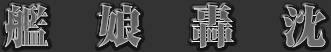
<style>
.page{position:relative;width:331px;height:52px;background:#333333}
.page>*{position:absolute;margin:0}
.t1{font:44px "RyuminPro-Ultra";letter-spacing:1.1em}
</style>
<div class="page">
<p class="t1" style="left:5px;top:4px;width:321px;height:44px">艦娘轟沈</p>
</div>
